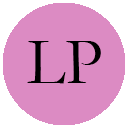
<style>
.page{position:relative;width:128px;height:128px;background:#dc8bc3}
.page>*{position:absolute;margin:0}
.t1{font:66.7px "Garamond";color:#000000}
</style>
<div class="page">
<p class="t1" style="left:27px;top:41px;width:74px;height:43px">LP</p>
</div>
